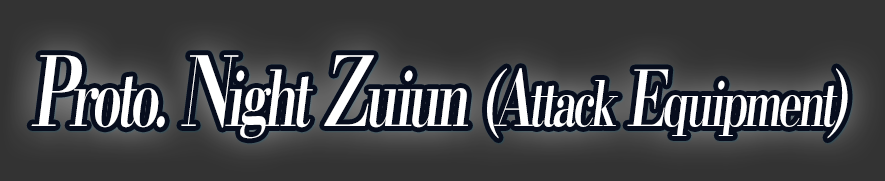
<style>
.page{position:relative;width:885px;height:181px;background:#333333}
.page>*{position:absolute;margin:0}
.t1{font:62.4px "KochoStd-Heavy";letter-spacing:-0.08em;color:#ffffff;font-style:italic;scale:0.7 1}
.t2{font:96px "KochoStd-Heavy";letter-spacing:-0.08em;color:#ffffff;font-style:italic;scale:0.7 1}
.t3{font:76.8px "KochoStd-Heavy";letter-spacing:-0.08em;color:#ffffff;font-style:italic;scale:0.7 1}
</style>
<div class="page">
<p class="t1" style="left:31px;top:55px;width:817px;height:84px"><span class="t2">P</span><span class="t3">roto.</span><span class="t2"> N</span><span class="t3">ight</span><span class="t2"> Z</span><span class="t3">uiun (A</span>ttack<span class="t3"> E</span>quipment<span class="t3">)</span></p>
</div>
